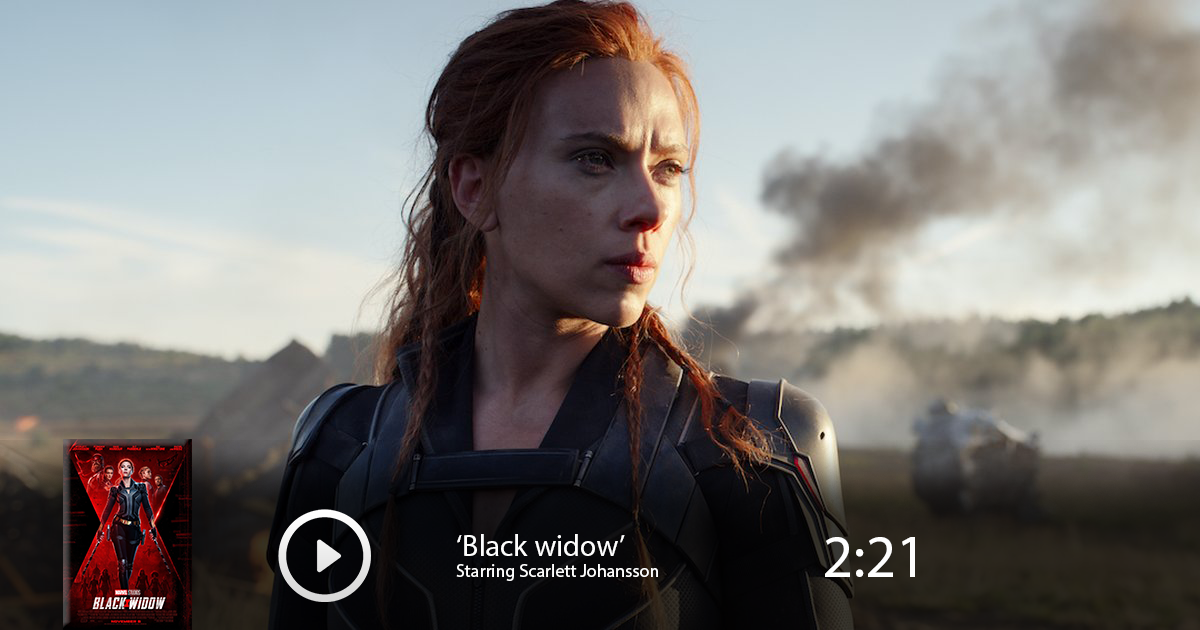
<style>
.page{position:relative;width:1200px;height:630px}
.page>*{position:absolute;margin:0}
.t1{font:18px "MyriadPro-Regular";color:#fefefe}
.t2{font:30px "MyriadPro-Regular";color:#fefefe}
.t3{font:60px "MyriadPro-Regular";color:#fefefe}
</style>
<div class="page">
<p class="t1" style="left:456px;top:534px;width:202px;height:47px"><span class="t2">‘Black widow’<br></span>Starring Scarlett Johansson</p>
<p class="t3" style="left:825px;top:537px;width:90px;height:40px">2:21</p>
</div>
